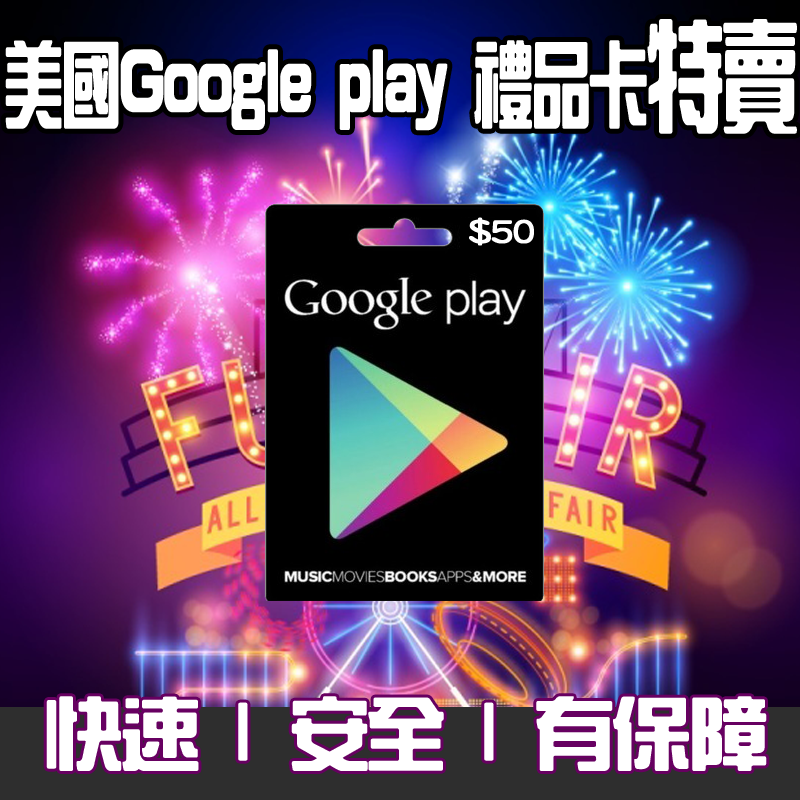
<style>
.page{position:relative;width:800px;height:800px}
.page>*{position:absolute;margin:0}
.t1{font:92.8px "HanWangZonYi";letter-spacing:-0.05em;color:#ffffff;font-weight:bold;scale:0.64 1}
.t2{font:120px "HanWangZonYi";letter-spacing:-0.05em;color:#ffffff;font-weight:bold;scale:0.64 1}
.t3{font:30px "HanWangYenHeavy";letter-spacing:-0.05em;color:#ffffff;font-weight:bold}
.t4{font:78.5px "HanWangZonYi";letter-spacing:-0.05em;color:#ffffff;font-weight:bold}
</style>
<div class="page">
<p class="t1" style="left:5px;top:19px;width:792px;height:115px">美國Google play 禮品卡<span class="t2">特賣</span></p>
<p class="t3" style="left:469px;top:217px;width:65px;height:29px">$50</p>
<p class="t4" style="left:46px;top:696px;width:721px;height:75px">快速 | 安全 | 有保障</p>
</div>
